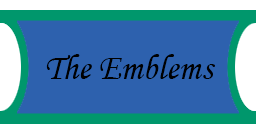
<style>
.page{position:relative;width:256px;height:128px;background:#2d61ae}
.page>*{position:absolute;margin:0}
.t1{font:36px "MonotypeCorsiva";color:#000000}
</style>
<div class="page">
<p class="t1" style="left:46px;top:54px;width:169px;height:25px">The Emblems</p>
</div>
